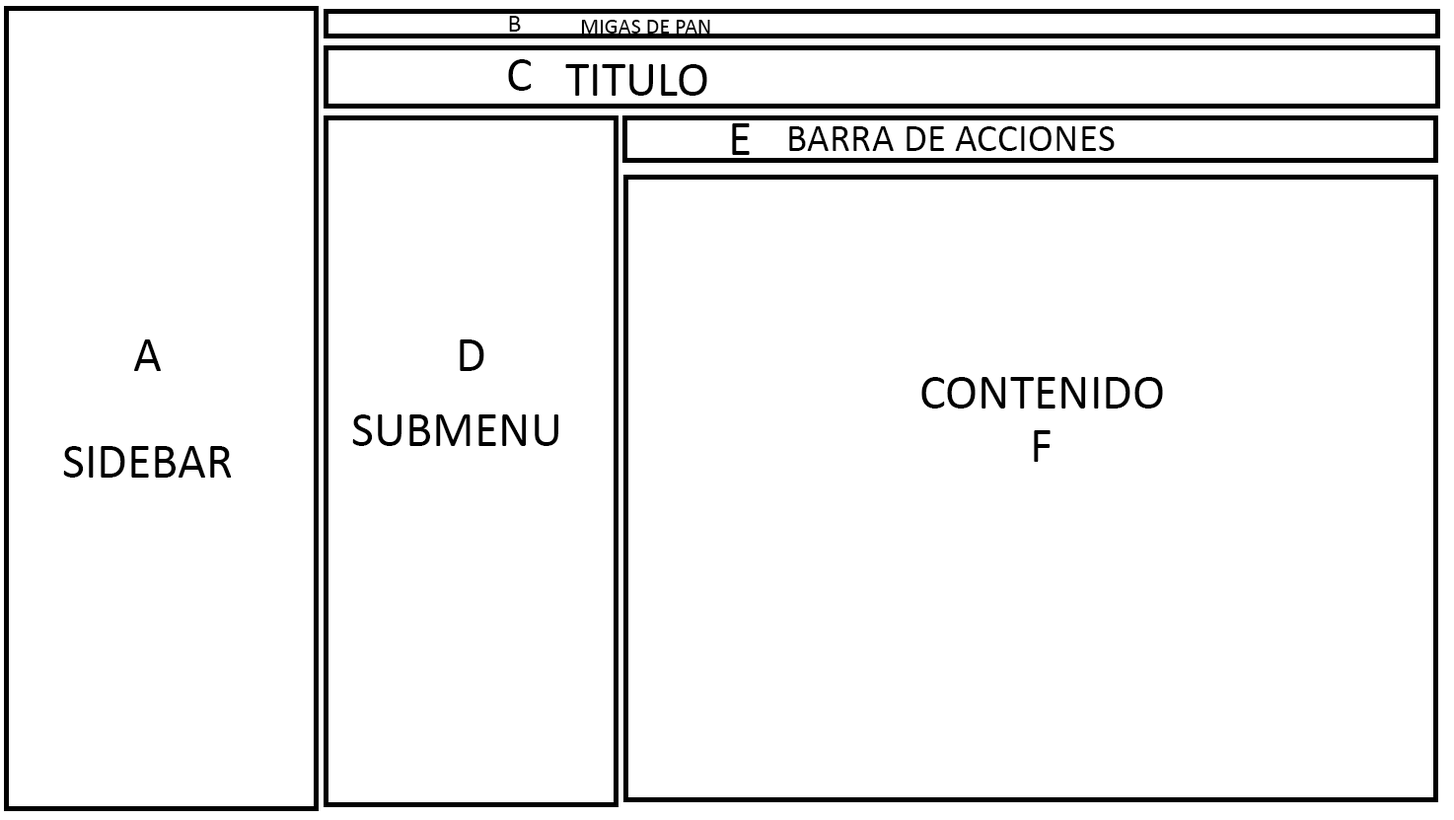
<style>
.page{position:relative;width:1454px;height:820px;background:#ffffff}
.page>*{position:absolute;margin:0}
.t1{font:25.8px "Calibri";color:#000000}
.t2{font:21.9px "Calibri";color:#000000}
.t3{font:49.3px "Calibri";color:#000000}
.t4{font:38.9px "Calibri";color:#000000}
</style>
<div class="page">
<p class="t1" style="left:509px;top:16px;width:12px;height:16px">B</p>
<p class="t2" style="left:581px;top:20px;width:129px;height:14px">MIGAS DE PAN</p>
<p class="t3" style="left:508px;top:59px;width:24px;height:32px">C</p>
<p class="t3" style="left:565px;top:64px;width:142px;height:32px">TITULO</p>
<p class="t3" style="left:732px;top:123px;width:18px;height:32px">E</p>
<p class="t4" style="left:789px;top:126px;width:326px;height:25px">BARRA DE ACCIONES</p>
<p class="t3" style="left:133px;top:339px;width:28px;height:32px">A</p>
<p class="t3" style="left:460px;top:339px;width:24px;height:32px">D</p>
<p class="t3" style="left:922px;top:377px;width:241px;height:31px">CONTENIDO</p>
<p class="t3" style="left:352px;top:414px;width:206px;height:32px">SUBMENU</p>
<p class="t3" style="left:1034px;top:430px;width:17px;height:32px">F</p>
<p class="t3" style="left:63px;top:446px;width:169px;height:32px">SIDEBAR</p>
</div>
